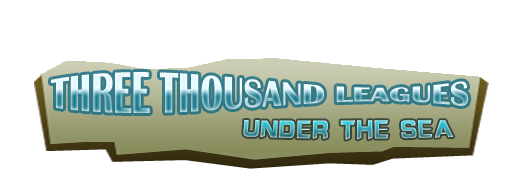
<style>
.page{position:relative;width:512px;height:181px;background:#ffffff}
.page>*{position:absolute;margin:0}
.t1{font:40px "BritannicBold";scale:0.86 1}
.t2{font:24px "HYk2gj";scale:0.88 1}
</style>
<div class="page">
<p class="t1" style="left:51px;top:72px;width:418px;height:41px">THREE THOUSAND LEAGUES</p>
<p class="t2" style="left:243px;top:120px;width:211px;height:20px">UNDER THE SEA</p>
</div>
